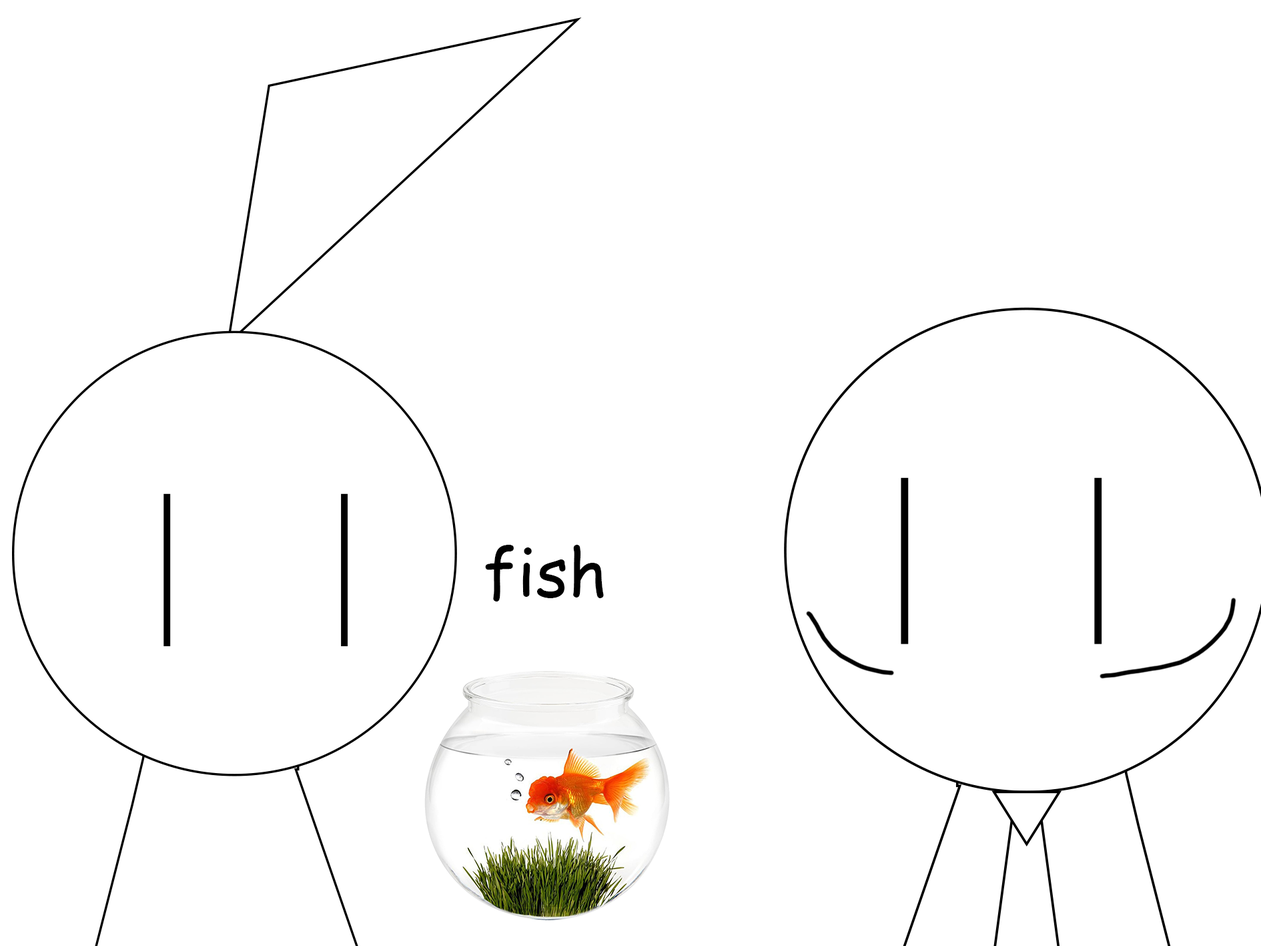
<style>
.page{position:relative;width:1261px;height:946px;background:#ffffff}
.page>*{position:absolute;margin:0}
.t1{font:66.7px "ComicSansMS";color:#000000}
</style>
<div class="page">
<p class="t1" style="left:485px;top:544px;width:119px;height:57px">fish</p>
</div>
